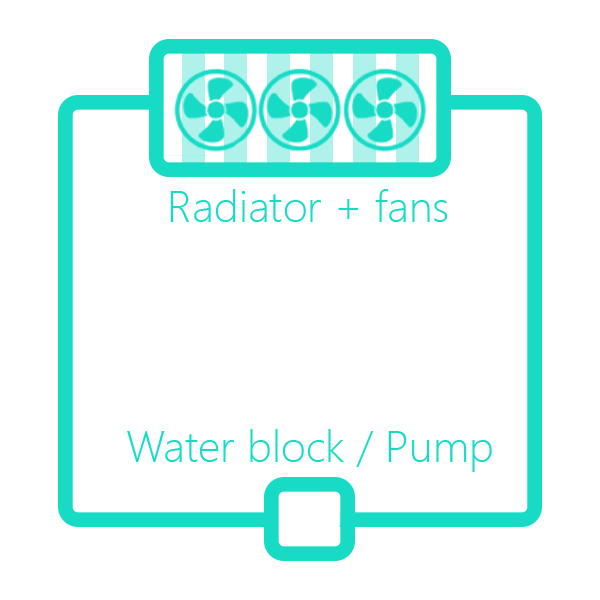
<style>
.page{position:relative;width:600px;height:600px;background:#ffffff}
.page>*{position:absolute;margin:0}
.t1{font:44.2px "SegoeUI-Light";color:#18dbc6}
</style>
<div class="page">
<p class="t1" style="left:170px;top:189px;width:278px;height:33px">Radiator + fans</p>
<p class="t1" style="left:127px;top:429px;width:365px;height:43px">Water block / Pump</p>
</div>
